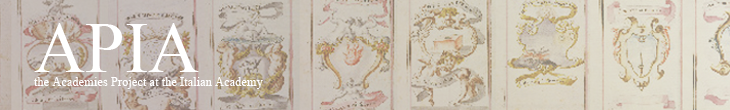
<style>
.page{position:relative;width:730px;height:110px}
.page>*{position:absolute;margin:0}
.t1{font:70.8px "IskoolaPota";color:#ffffff}
.t2{font:12.5px "IskoolaPota";color:#ffffff}
</style>
<div class="page">
<p class="t1" style="left:34px;top:23px;width:165px;height:49px">APIA</p>
<p class="t2" style="left:34px;top:77px;width:229px;height:12px">the Academies Project at the Italian Academy</p>
</div>
